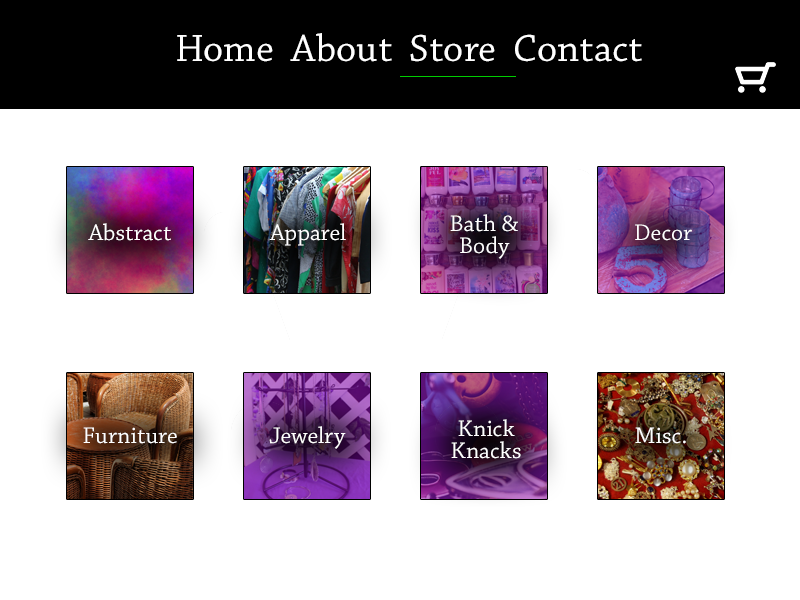
<style>
.page{position:relative;width:800px;height:600px;background:#ffffff}
.page>*{position:absolute;margin:0}
.t1{font:40px "ChaparralPro-Regular";color:#ffffff}
.t2{font:24px/22px "ChaparralPro-Regular";color:#ffffff}
.t3{font:24px "ChaparralPro-Regular";color:#ffffff}
.t4{font:24px "MyriadPro-Regular";color:#ffffff}
</style>
<div class="page">
<p class="t1" style="left:177px;top:33px;width:465px;height:29px">Home  About  Store  Contact</p>
<p class="t2" style="left:450px;top:214px;width:68px;height:45px;text-align:center">Bath &amp; <br>Body</p>
<p class="t3" style="left:88px;top:223px;width:83px;height:18px">Abstract</p>
<p class="t3" style="left:269px;top:223px;width:77px;height:23px"><span class="t4"><br></span>Apparel</p>
<p class="t3" style="left:635px;top:224px;width:57px;height:17px"><span class="t4"><br></span>Decor</p>
<p class="t2" style="left:451px;top:419px;width:70px;height:40px;text-align:center">Knick<br>Knacks</p>
<p class="t3" style="left:83px;top:427px;width:94px;height:17px">Furniture</p>
<p class="t3" style="left:269px;top:426px;width:77px;height:23px">Jewelry</p>
<p class="t3" style="left:635px;top:427px;width:51px;height:17px"><span class="t4"><br></span>Misc.</p>
</div>
